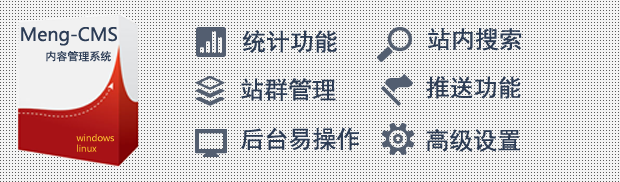
<style>
.page{position:relative;width:620px;height:182px;background:#f3f3f3}
.page>*{position:absolute;margin:0}
.t1{font:18px "MicrosoftYaHei";color:#2c3c55}
.t2{font:24px "SimHei";color:#2c3c55}
.t3{font:11px "SimHei";color:#2c3c55}
.t4{font:9px "MicrosoftYaHei";color:#ffcc2f}
</style>
<div class="page">
<p class="t1" style="left:21px;top:27px;width:96px;height:19px">Meng-CMS</p>
<p class="t2" style="left:242px;top:30px;width:95px;height:23px">统计功能</p>
<p class="t2" style="left:428px;top:28px;width:94px;height:23px">站内搜索</p>
<p class="t3" style="left:46px;top:51px;width:65px;height:11px">内容管理系统</p>
<p class="t2" style="left:241px;top:78px;width:95px;height:23px">站群管理</p>
<p class="t2" style="left:426px;top:76px;width:95px;height:23px">推送功能</p>
<p class="t4" style="left:76px;top:134px;width:38px;height:8px">windows</p>
<p class="t2" style="left:241px;top:127px;width:118px;height:24px">后台易操作</p>
<p class="t2" style="left:426px;top:129px;width:94px;height:23px">高级设置</p>
<p class="t4" style="left:77px;top:144px;width:20px;height:8px">linux</p>
</div>
